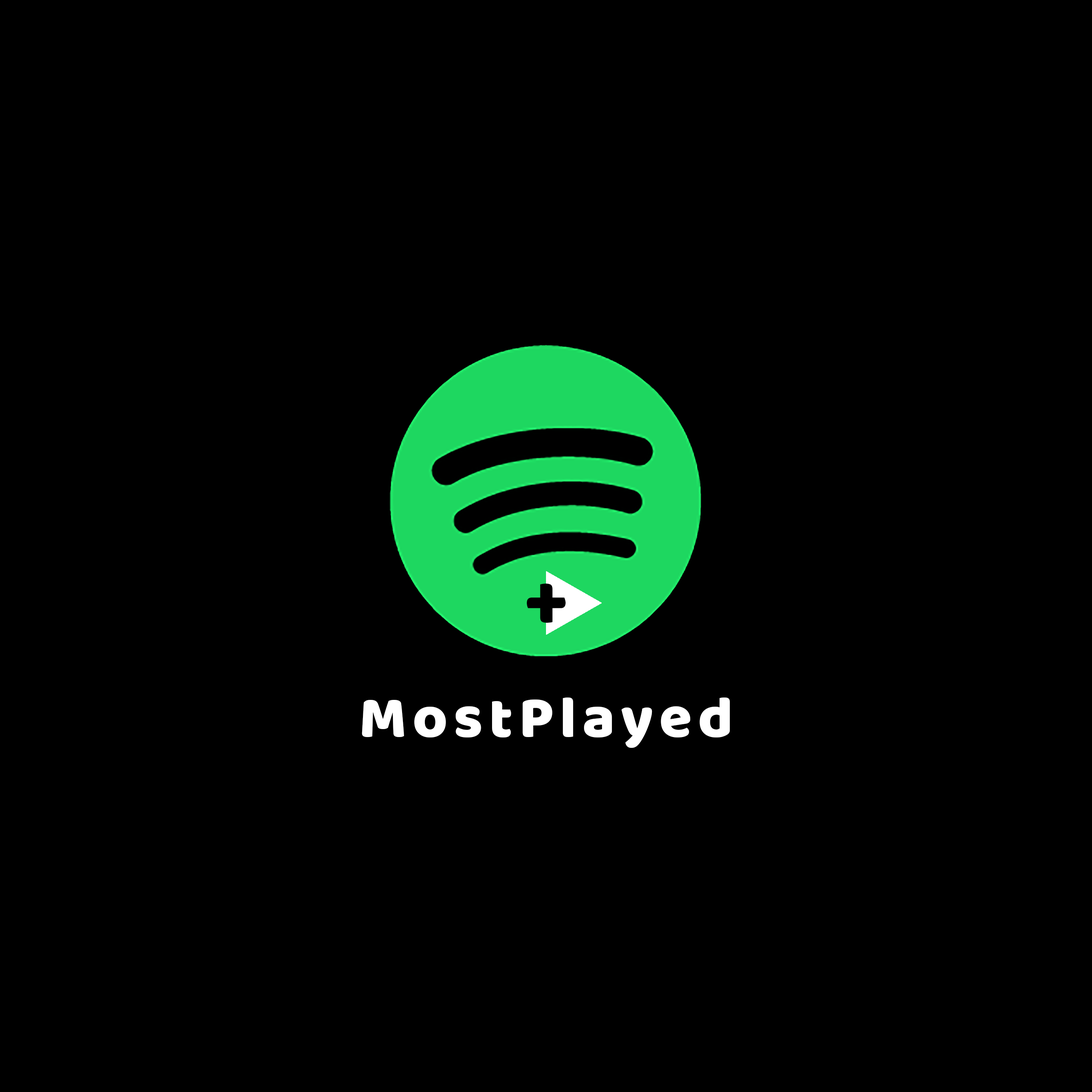
<style>
.page{position:relative;width:1092px;height:1092px;background:#000000}
.page>*{position:absolute;margin:0}
.t1{font:79.9px "Baloo-Regular";letter-spacing:0.1em;color:#000000}
.t2{font:60px "Baloo-Regular";letter-spacing:0.1em;color:#ffffff}
</style>
<div class="page">
<p class="t1" style="left:527px;top:584px;width:39px;height:39px">+</p>
<p class="t2" style="left:362px;top:697px;width:368px;height:51px">MostPlayed</p>
</div>
